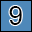
<style>
.page{position:relative;width:32px;height:32px;background:#4e88b9}
.page>*{position:absolute;margin:0}
.t1{font:26px "ArialMT";letter-spacing:0.013em;color:#000000}
</style>
<div class="page">
<p class="t1" style="left:9px;top:6px;width:13px;height:19px">9</p>
</div>
